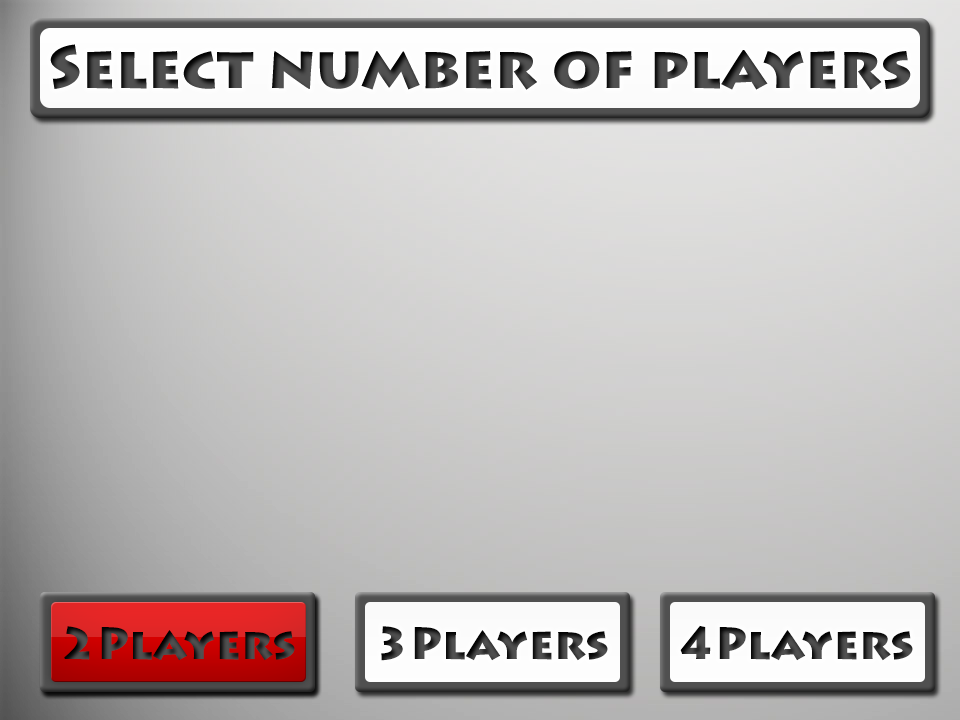
<style>
.page{position:relative;width:960px;height:720px}
.page>*{position:absolute;margin:0}
.t1{font:45px "LithosPro-Black"}
</style>
<div class="page">
<p class="t1" style="left:64px;top:626px;width:231px;height:35px">2Players</p>
<p class="t1" style="left:381px;top:626px;width:227px;height:35px">3Players</p>
<p class="t1" style="left:680px;top:625px;width:233px;height:36px">4Players</p>
</div>
